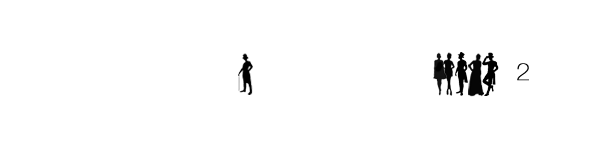
<style>
.page{position:relative;width:609px;height:153px;background:#ffffff}
.page>*{position:absolute;margin:0}
.t1{font:24px "HelveticaNeue-UltraLight";letter-spacing:0.02em;color:#000000;font-weight:bold}
</style>
<div class="page">
<p class="t1" style="left:517px;top:63px;width:12px;height:18px">2</p>
</div>
